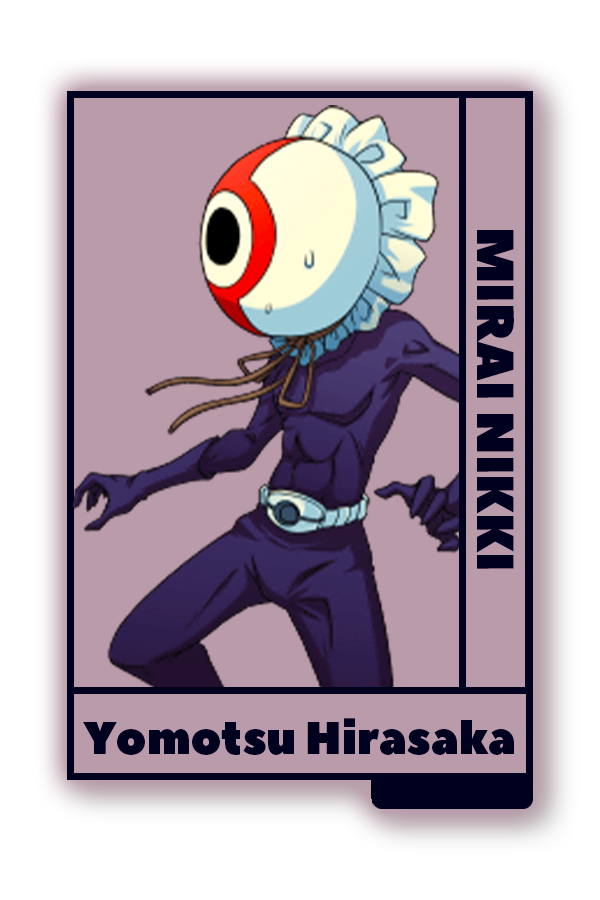
<style>
.page{position:relative;width:600px;height:900px;background:#ba9ba9}
.page>*{position:absolute;margin:0}
.t1{font:52px "PeaceSans";color:#00001b}
.t2{font:45.6px "PeaceSans";color:#00001b}
</style>
<div class="page">
<p class="t1" style="left:477px;top:230px;width:37px;height:339px;rotate:90deg">MIRAI NIKKI</p>
<p class="t2" style="left:83px;top:718px;width:431px;height:37px">Yomotsu Hirasaka</p>
</div>
